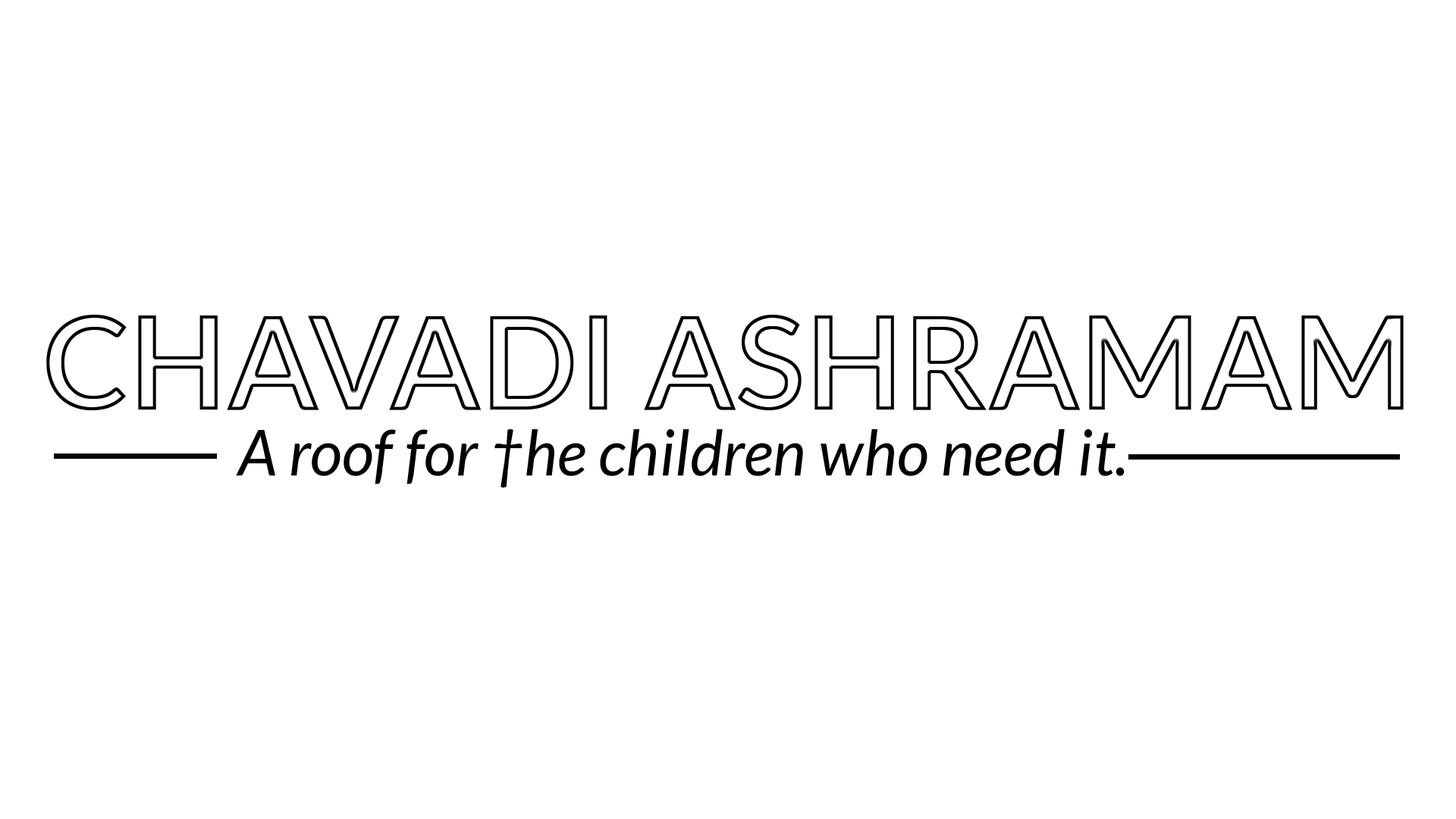
<style>
.page{position:relative;width:1456px;height:819px;background:#ffffff}
.page>*{position:absolute;margin:0}
.t1{font:63.2px "Lato-Italic";color:#000000}
</style>
<div class="page">
<p class="t1" style="left:236px;top:429px;width:889px;height:59px">A roof for †he children who need it.</p>
</div>
